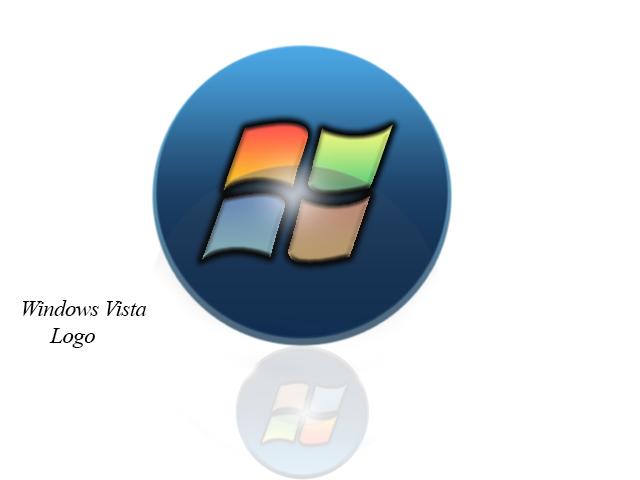
<style>
.page{position:relative;width:640px;height:480px;background:#ffffff}
.page>*{position:absolute;margin:0}
.t1{font:22.9px "TimesNewRomanPS-ItalicMT";letter-spacing:-0.025em;color:#000000}
</style>
<div class="page">
<p class="t1" style="left:23px;top:300px;width:123px;height:48px;text-align:right">Windows Vista<br>Logo</p>
</div>
